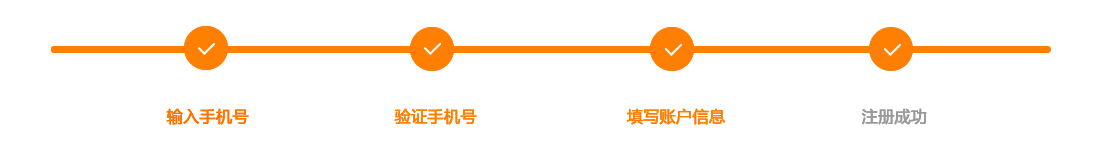
<style>
.page{position:relative;width:1100px;height:164px;background:#ffffff}
.page>*{position:absolute;margin:0}
.t1{font:16.1px "MicrosoftYaHei";color:#ff7300;font-weight:bold}
.t2{font:16.1px "MicrosoftYaHei";color:#ff7f01;font-weight:bold}
.t3{font:16.1px "MicrosoftYaHei";color:#ff7f02;font-weight:bold}
.t4{font:16.1px "MicrosoftYaHei";color:#999999;font-weight:bold}
</style>
<div class="page">
<p class="t1" style="left:166px;top:108px;width:83px;height:17px">输入手机号</p>
<p class="t1" style="left:166px;top:108px;width:83px;height:17px">输入手机号</p>
<p class="t2" style="left:394px;top:108px;width:83px;height:17px">验证手机号</p>
<p class="t2" style="left:394px;top:108px;width:83px;height:17px">验证手机号</p>
<p class="t3" style="left:626px;top:108px;width:100px;height:17px">填写账户信息</p>
<p class="t3" style="left:626px;top:108px;width:100px;height:17px">填写账户信息</p>
<p class="t4" style="left:861px;top:108px;width:66px;height:17px">注册成功</p>
<p class="t4" style="left:861px;top:108px;width:66px;height:17px">注册成功</p>
</div>
